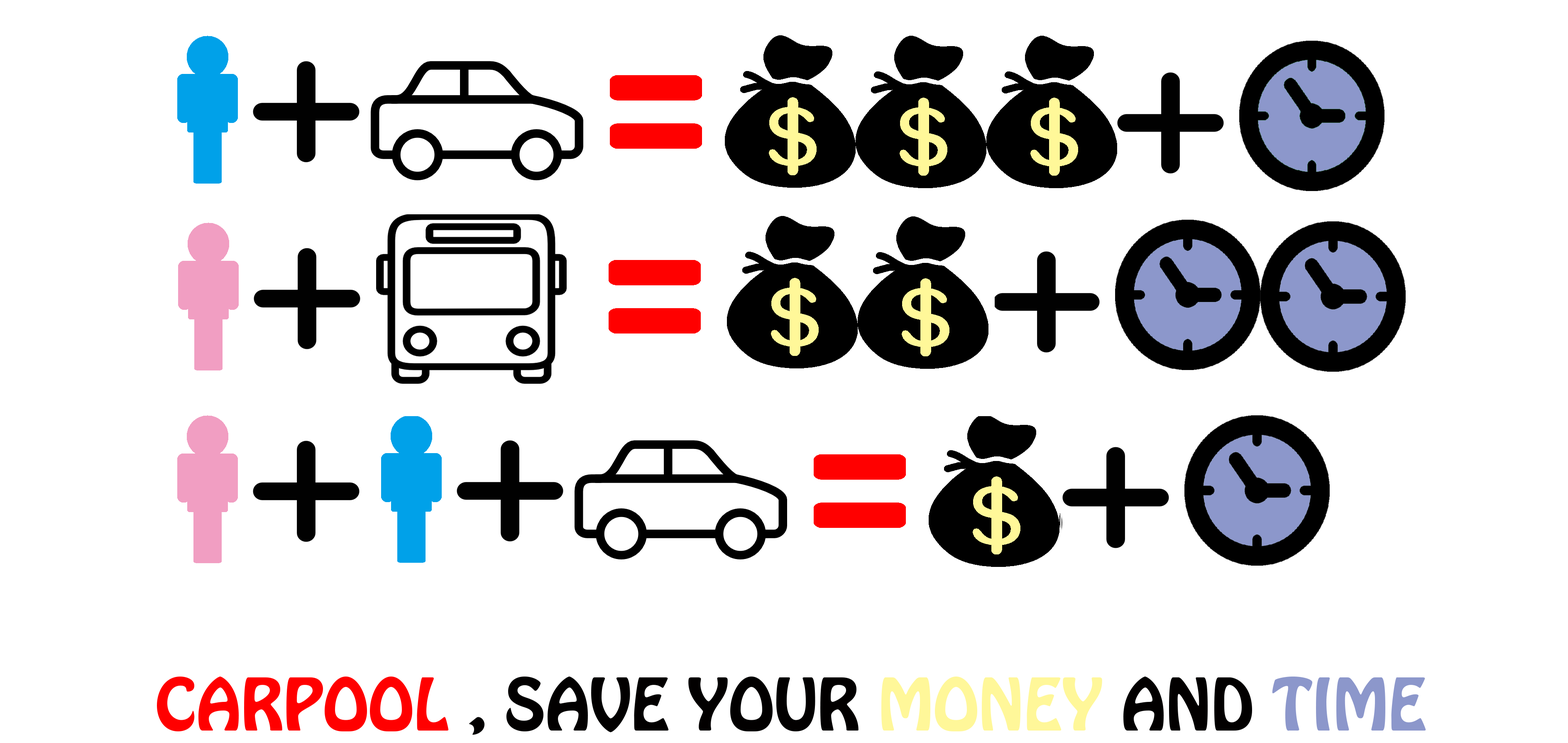
<style>
.page{position:relative;width:1568px;height:743px;background:#ffffff}
.page>*{position:absolute;margin:0}
.t1{font:63.8px "HoboStd";color:#020000}
.t2{font:63.8px "HoboStd";color:#ff0000}
.t3{font:63.8px "HoboStd";color:#fff799}
.t4{font:63.8px "HoboStd";color:#8c97cb}
</style>
<div class="page">
<p class="t1" style="left:157px;top:676px;width:1269px;height:58px"><span class="t2">CARPOOL</span> , SAVE YOUR <span class="t3">MONEY</span> AND <span class="t4">TIME</span></p>
</div>
